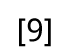
<style>
.page{position:relative;width:70px;height:55px;background:#ffffff}
.page>*{position:absolute;margin:0}
.t1{font:31.8px "DroidSans";color:#000000}
</style>
<div class="page">
<p class="t1" style="left:19px;top:18px;width:32px;height:29px">[9]</p>
</div>
